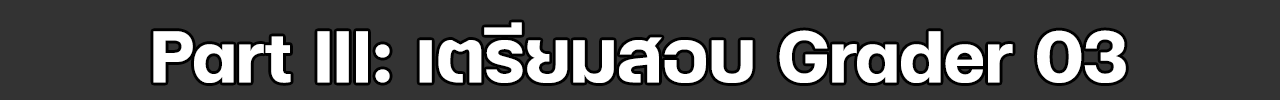
<style>
.page{position:relative;width:1280px;height:100px;background:#333333}
.page>*{position:absolute;margin:0}
.t1{font:100px "FCMinimalBold";color:#ffffff}
</style>
<div class="page">
<p class="t1" style="left:153px;top:22px;width:973px;height:61px">Part III: เตรียมสอบ Grader 03</p>
</div>
